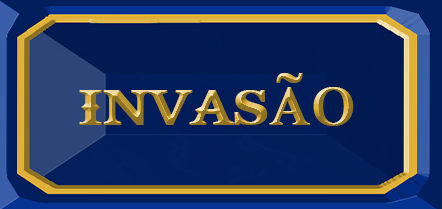
<style>
.page{position:relative;width:442px;height:209px}
.page>*{position:absolute;margin:0}
.t1{font:76px "GodOfWar";font-variant:small-caps;font-weight:bold}
.t2{font:76px "TimesNewRomanPSMT";font-variant:small-caps;font-weight:bold}
</style>
<div class="page">
<p class="t1" style="left:79px;top:73px;width:275px;height:53px">invas<span class="t2">ão</span></p>
</div>
